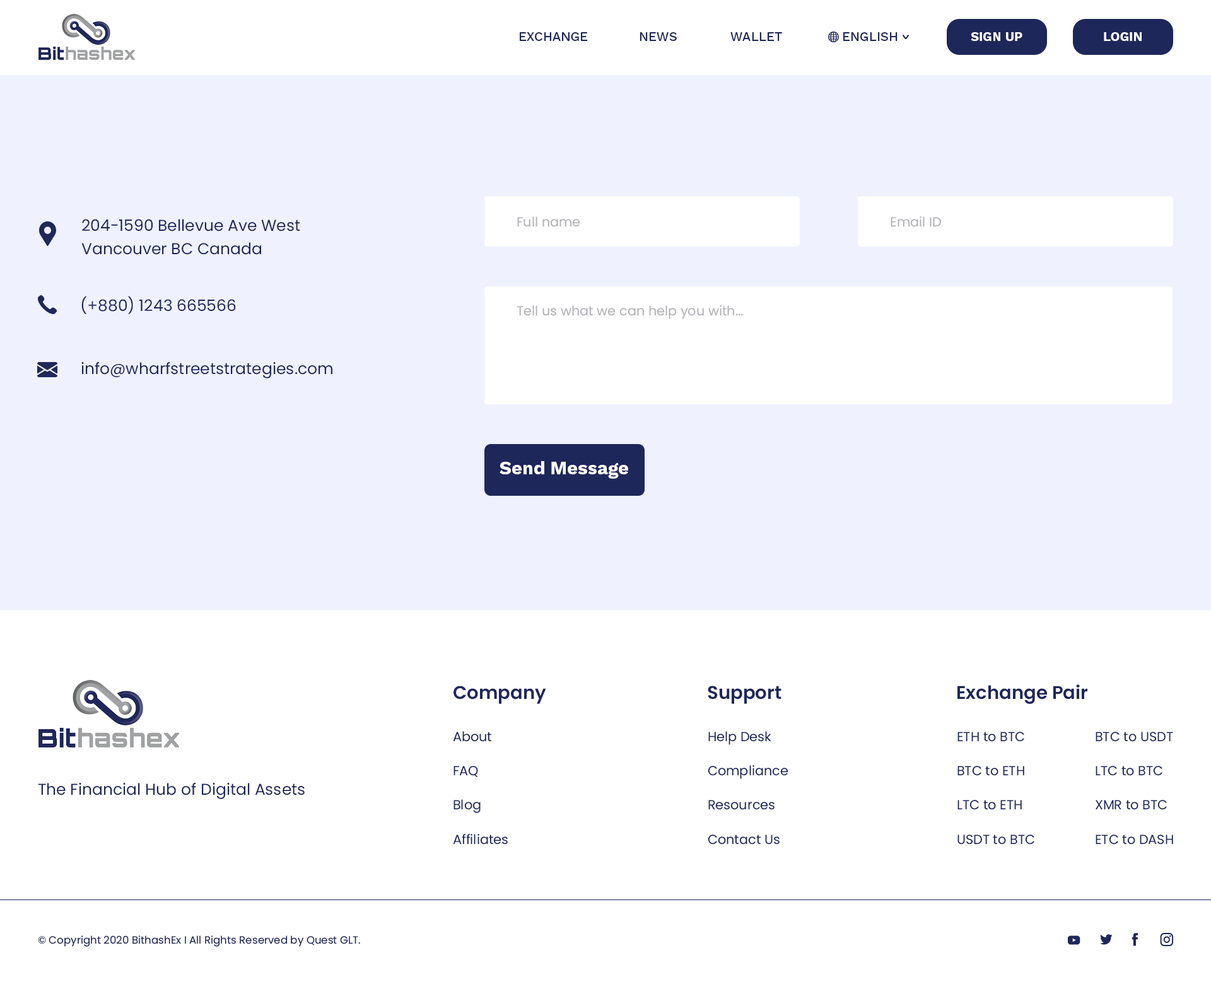
<style>
.page{position:relative;width:1211px;height:984px;background:#ffffff}
.page>*{position:absolute;margin:0}
.t1{font:12.9px "WorkSans-Medium";color:#1e2759;text-transform:uppercase}
.t2{font:12.8px "WorkSans-Bold";color:#ffffff;text-transform:uppercase}
.t3{font:15.8px/23.7px "Poppins-Regular";color:#1e275a}
.t4{font:13.1px "Poppins-Regular";color:#b2b2b7}
.t5{font:15.8px "Poppins-Regular";color:#1e275a}
.t6{font:18.4px "WorkSans-Bold";color:#ffffff}
.t7{font:18.4px "Poppins-SemiBold";color:#1e275a}
.t8{font:13.1px/34.2px "Poppins-Regular";color:#1e275a}
.t9{font:10.5px "Poppins-Regular";color:#1e275a}
</style>
<div class="page">
<p class="t1" style="left:520px;top:32px;width:68px;height:9px">exchange</p>
<p class="t1" style="left:640px;top:32px;width:37px;height:9px">news</p>
<p class="t1" style="left:731px;top:32px;width:51px;height:9px">wallet</p>
<p class="t1" style="left:844px;top:32px;width:54px;height:9px">english</p>
<p class="t2" style="left:971px;top:32px;width:52px;height:9px">sign up</p>
<p class="t2" style="left:1104px;top:32px;width:38px;height:9px">login</p>
<p class="t3" style="left:81px;top:219px;width:219px;height:36px">204-1590 Bellevue Ave West<br>Vancouver BC Canada</p>
<p class="t4" style="left:517px;top:216px;width:63px;height:11px">Full name</p>
<p class="t4" style="left:891px;top:216px;width:50px;height:11px">Email ID</p>
<p class="t5" style="left:81px;top:296px;width:155px;height:18px">(+880) 1243 665566</p>
<p class="t4" style="left:517px;top:305px;width:226px;height:14px">Tell us what we can help you with...</p>
<p class="t5" style="left:81px;top:362px;width:252px;height:17px">info@wharfstreetstrategies.com</p>
<p class="t6" style="left:500px;top:461px;width:128px;height:18px">Send Message</p>
<p class="t7" style="left:454px;top:686px;width:92px;height:18px">Company</p>
<p class="t7" style="left:708px;top:686px;width:74px;height:18px">Support</p>
<p class="t7" style="left:958px;top:685px;width:130px;height:19px">Exchange Pair</p>
<p class="t8" style="left:453px;top:731px;width:55px;height:114px">About<br>FAQ<br>Blog<br>Affiliates</p>
<p class="t8" style="left:708px;top:731px;width:81px;height:114px">Help Desk<br>Compliance<br>Resources<br>Contact Us</p>
<p class="t8" style="left:958px;top:732px;width:77px;height:113px">ETH to BTC<br>BTC to ETH<br>LTC to ETH<br>USDT to BTC</p>
<p class="t8" style="left:1096px;top:732px;width:78px;height:113px">BTC to USDT<br>LTC to BTC<br>XMR to BTC<br>ETC to DASH</p>
<p class="t5" style="left:38px;top:783px;width:267px;height:16px">The Financial Hub of Digital Assets</p>
<p class="t9" style="left:38px;top:936px;width:322px;height:11px">© Copyright 2020 BithashEx I All Rights Reserved by Quest GLT.</p>
</div>
